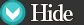
<style>
.page{position:relative;width:84px;height:25px;background:#333333}
.page>*{position:absolute;margin:0}
.t1{font:22px "RyuminPro-ExBold";letter-spacing:-0.08em;color:#fffffd}
</style>
<div class="page">
<p class="t1" style="left:31px;top:4px;width:42px;height:17px">Hide</p>
</div>
